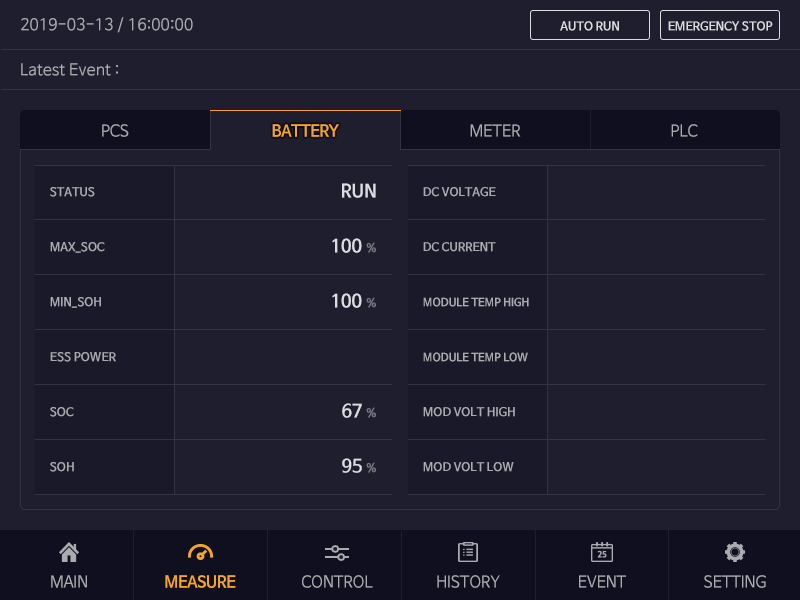
<style>
.page{position:relative;width:800px;height:600px;background:#1e1e2f}
.page>*{position:absolute;margin:0}
.t1{font:16px "NanumBarunGothic";color:#aaaaaf}
.t2{font:12px "NanumBarunGothicBold";color:#dcdce1}
.t3{font:16px "NanumBarunGothic";letter-spacing:-0.025em;color:#aaaaaf}
.t4{font:16px "NanumBarunGothicBold";letter-spacing:-0.025em;color:#f5a623}
.t5{font:18px/55px "NanumBarunGothicBold";color:#dcdce1}
.t6{font:12px/55px "NanumBarunGothicBold";color:#787882}
.t7{font:12px/55px "NanumBarunGothicBold";color:#aaaaaf}
.t8{font:11px/55px "NanumBarunGothicBold";color:#aaaaaf}
</style>
<div class="page">
<p class="t1" style="left:21px;top:17px;width:172px;height:16px">2019-03-13 / 16:00:00</p>
<p class="t2" style="left:560px;top:21px;width:59px;height:10px">AUTO RUN</p>
<p class="t2" style="left:668px;top:21px;width:105px;height:10px">EMERGENCY STOP</p>
<p class="t1" style="left:21px;top:63px;width:97px;height:13px">Latest Event :</p>
<p class="t3" style="left:102px;top:124px;width:27px;height:13px">PCS</p>
<p class="t4" style="left:272px;top:124px;width:67px;height:13px">BATTERY</p>
<p class="t3" style="left:470px;top:124px;width:51px;height:13px">METER</p>
<p class="t3" style="left:671px;top:124px;width:27px;height:13px">PLC</p>
<p class="t5" style="left:332px;top:183px;width:44px;height:290px;text-align:right">RUN<br>100 <span class="t6">%<br></span>100 <span class="t6">%<br><br></span>67 <span class="t6">%<br></span>95 <span class="t6">%</span></p>
<p class="t7" style="left:50px;top:187px;width:66px;height:285px">STATUS<br>MAX_SOC<br>MIN_SOH<br>ESS POWER<br>SOC<br>SOH</p>
<p class="t8" style="left:423px;top:187px;width:106px;height:285px"><span class="t7">DC VOLTAGE<br>DC CURRENT<br></span>MODULE TEMP HIGH<br>MODULE TEMP LOW<br><span class="t7">MOD VOLT HIGH<br>MOD VOLT LOW</span></p>
<p class="t3" style="left:51px;top:575px;width:36px;height:13px">MAIN</p>
<p class="t4" style="left:165px;top:575px;width:71px;height:13px">MEASURE</p>
<p class="t3" style="left:302px;top:575px;width:71px;height:13px">CONTROL</p>
<p class="t3" style="left:437px;top:575px;width:63px;height:13px">HISTORY</p>
<p class="t3" style="left:579px;top:575px;width:47px;height:13px">EVENT</p>
<p class="t3" style="left:704px;top:575px;width:62px;height:13px">SETTING</p>
</div>
